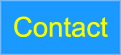
<style>
.page{position:relative;width:121px;height:55px;background:#1a99ff}
.page>*{position:absolute;margin:0}
.t1{font:27.5px "ArialMT";color:#f6ff00}
</style>
<div class="page">
<p class="t1" style="left:14px;top:16px;width:94px;height:21px">Contact</p>
</div>
